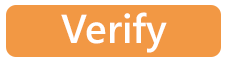
<style>
.page{position:relative;width:227px;height:61px;background:#f29844}
.page>*{position:absolute;margin:0}
.t1{font:40.5px "YuGothicUI-Semibold";color:#ffffff}
</style>
<div class="page">
<p class="t1" style="left:61px;top:12px;width:106px;height:41px">Verify</p>
</div>
